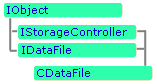
<style>
.page{position:relative;width:157px;height:84px;background:#2fffac}
.page>*{position:absolute;margin:0}
.t1{font:11px "Verdana";color:#0000cc}
</style>
<div class="page">
<p class="t1" style="left:7px;top:5px;width:41px;height:11px">IObject</p>
<p class="t1" style="left:21px;top:27px;width:106px;height:11px">IStorageController</p>
<p class="t1" style="left:22px;top:45px;width:49px;height:9px">IDataFile</p>
<p class="t1" style="left:37px;top:68px;width:53px;height:9px">CDataFile</p>
</div>
